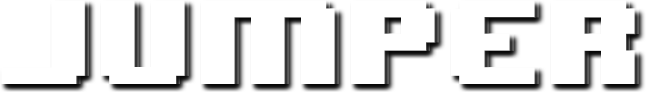
<style>
.page{position:relative;width:646px;height:92px;background:#ffffff}
.page>*{position:absolute;margin:0}
.t1{font:100.4px "8BITWONDERNominal";color:#ffffff}
.t2{font:99.4px "8BITWONDERNominal";color:#ffffff}
</style>
<div class="page">
<p class="t1" style="left:1px;top:0px;width:634px;height:84px">Jumper</p>
<p class="t2" style="left:2px;top:1px;width:634px;height:83px">Jumper</p>
</div>
